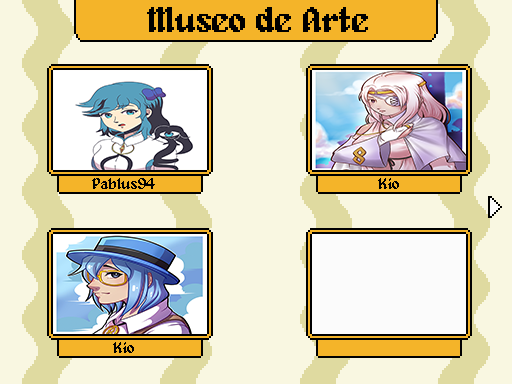
<style>
.page{position:relative;width:512px;height:384px;background:#f9f7e1}
.page>*{position:absolute;margin:0}
.t1{font:16px "Alagard";letter-spacing:-0.025em;color:#000000}
</style>
<div class="page">
<p class="t1" style="left:92px;top:178px;width:63px;height:11px">Pablus94</p>
<p class="t1" style="left:378px;top:178px;width:21px;height:11px">Kio</p>
<p class="t1" style="left:113px;top:342px;width:21px;height:11px">Kio</p>
</div>
